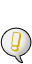
<style>
.page{position:relative;width:32px;height:64px;background:#ffffff}
.page>*{position:absolute;margin:0}
.t1{font:18px "akaDylanOpen";color:#d4af00}
</style>
<div class="page">
<p class="t1" style="left:10px;top:31px;width:12px;height:21px">!</p>
</div>
